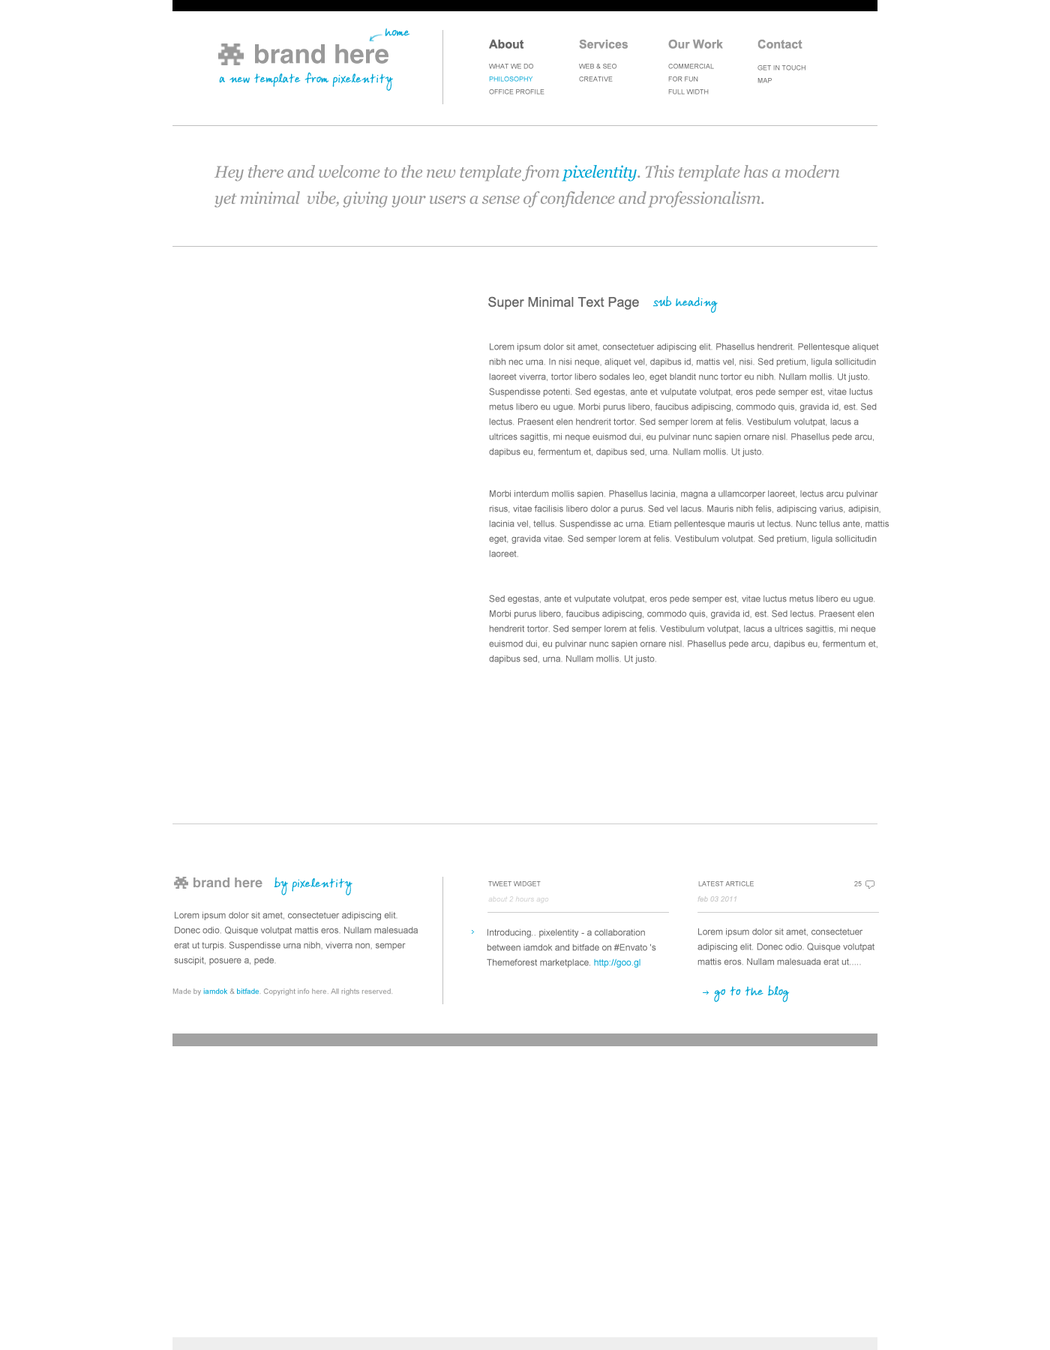
<style>
.page{position:relative;width:1050px;height:1350px;background:#ffffff}
.page>*{position:absolute;margin:0}
.t1{font:12px "ArdleysHand-Plain";color:#00a6d5}
.t2{font:12px "Arial-BoldMT";color:#666666}
.t3{font:12px "Arial-BoldMT";color:#999999}
.t4{font:26.3px "HelveticaLTStd-Bold";color:#999999}
.t5{font:6.8px "ArialMT";color:#666666;text-transform:uppercase}
.t6{font:6.8px "ArialMT";text-transform:uppercase}
.t7{font:16.5px/26.3px "Georgia-Italic";letter-spacing:-0.025em;color:#999999}
.t8{font:16.5px/26.3px "Georgia-Italic";letter-spacing:-0.025em;color:#00a6d5}
.t9{font:13.5px "ArialMT";color:#666666}
.t10{font:9px/15px "ArialMT";color:#666666}
.t11{font:13.5px "HelveticaLTStd-Bold";color:#999999}
.t12{font:7.5px "Arial-ItalicMT";color:#cccccc}
.t13{font:9px/15px "ArialMT";color:#00a6d5}
.t14{font:6px "SempliceRegular";color:#00a6d5}
.t15{font:7.5px "ArialMT";color:#999999}
.t16{font:7.5px "ArialMT";color:#00a6d5}
</style>
<div class="page">
<p class="t1" style="left:385px;top:28px;width:25px;height:9px">home</p>
<p class="t2" style="left:489px;top:39px;width:35px;height:10px">About</p>
<p class="t3" style="left:579px;top:39px;width:50px;height:10px">Services</p>
<p class="t3" style="left:668px;top:39px;width:55px;height:10px">Our Work</p>
<p class="t3" style="left:758px;top:39px;width:45px;height:10px">Contact</p>
<p class="t4" style="left:255px;top:44px;width:134px;height:20px">brand here</p>
<p class="t5" style="left:489px;top:64px;width:44px;height:5px">what we do</p>
<p class="t5" style="left:579px;top:64px;width:38px;height:5px">web &amp; SEO</p>
<p class="t5" style="left:668px;top:64px;width:46px;height:5px">commercial</p>
<p class="t5" style="left:758px;top:65px;width:48px;height:6px">get in touch</p>
<p class="t1" style="left:219px;top:72px;width:174px;height:19px">a new template from pixelentity</p>
<p class="t6" style="left:489px;top:77px;width:44px;height:5px">philosophy</p>
<p class="t5" style="left:579px;top:77px;width:34px;height:5px">creative</p>
<p class="t5" style="left:668px;top:77px;width:30px;height:5px">for fun</p>
<p class="t5" style="left:489px;top:89px;width:56px;height:6px">office profile</p>
<p class="t5" style="left:668px;top:89px;width:41px;height:6px">full width</p>
<p class="t5" style="left:758px;top:78px;width:14px;height:5px">map</p>
<p class="t7" style="left:214px;top:165px;width:626px;height:43px">Hey there and welcome to the new template from <span class="t8">pixelentity</span>. This template has a modern yet minimal  vibe, giving your users a sense of confidence and professionalism.</p>
<p class="t9" style="left:488px;top:296px;width:151px;height:14px">Super Minimal Text Page</p>
<p class="t1" style="left:653px;top:296px;width:65px;height:18px">sub heading</p>
<p class="t10" style="left:489px;top:343px;width:390px;height:114px">Lorem ipsum dolor sit amet, consectetuer adipiscing elit. Phasellus hendrerit. Pellentesque aliquet nibh nec urna. In nisi neque, aliquet vel, dapibus id, mattis vel, nisi. Sed pretium, ligula sollicitudin laoreet viverra, tortor libero sodales leo, eget blandit nunc tortor eu nibh. Nullam mollis. Ut justo. Suspendisse potenti. Sed egestas, ante et vulputate volutpat, eros pede semper est, vitae luctus metus libero eu ugue. Morbi purus libero, faucibus adipiscing, commodo quis, gravida id, est. Sed lectus. Praesent elen hendrerit tortor. Sed semper lorem at felis. Vestibulum volutpat, lacus a ultrices sagittis, mi neque euismod dui, eu pulvinar nunc sapien ornare nisl. Phasellus pede arcu, dapibus eu, fermentum et, dapibus sed, urna. Nullam mollis. Ut justo.</p>
<p class="t10" style="left:489px;top:490px;width:400px;height:174px">Morbi interdum mollis sapien. Phasellus lacinia, magna a ullamcorper laoreet, lectus arcu pulvinar risus, vitae facilisis libero dolor a purus. Sed vel lacus. Mauris nibh felis, adipiscing varius, adipisin, lacinia vel, tellus. Suspendisse ac urna. Etiam pellentesque mauris ut lectus. Nunc tellus ante, mattis eget, gravida vitae. Sed semper lorem at felis. Vestibulum volutpat. Sed pretium, ligula sollicitudin laoreet.<br><br><br>Sed egestas, ante et vulputate volutpat, eros pede semper est, vitae luctus metus libero eu ugue. Morbi purus libero, faucibus adipiscing, commodo quis, gravida id, est. Sed lectus. Praesent elen hendrerit tortor. Sed semper lorem at felis. Vestibulum volutpat, lacus a ultrices sagittis, mi neque euismod dui, eu pulvinar nunc sapien ornare nisl. Phasellus pede arcu, dapibus eu, fermentum et, dapibus sed, urna. Nullam mollis. Ut justo.</p>
<p class="t11" style="left:194px;top:878px;width:69px;height:10px">brand here</p>
<p class="t1" style="left:274px;top:877px;width:79px;height:19px">by pixelentity</p>
<p class="t5" style="left:488px;top:881px;width:53px;height:6px">TWeet widget</p>
<p class="t5" style="left:698px;top:881px;width:56px;height:6px">latest article</p>
<p class="t6" style="left:854px;top:881px;width:8px;height:6px">25</p>
<p class="t12" style="left:488px;top:896px;width:61px;height:8px">about 2 hours ago</p>
<p class="t12" style="left:698px;top:896px;width:39px;height:6px">feb 03 2011</p>
<p class="t10" style="left:174px;top:911px;width:244px;height:54px">Lorem ipsum dolor sit amet, consectetuer adipiscing elit. Donec odio. Quisque volutpat mattis eros. Nullam malesuada erat ut turpis. Suspendisse urna nibh, viverra non, semper suscipit, posuere a, pede.</p>
<p class="t10" style="left:487px;top:929px;width:169px;height:39px">Introducing.. pixelentity - a collaboration between iamdok and bitfade on #Envato 's Themeforest marketplace. <span class="t13">http://goo.gl</span></p>
<p class="t10" style="left:698px;top:928px;width:177px;height:37px">Lorem ipsum dolor sit amet, consectetuer adipiscing elit. Donec odio. Quisque volutpat mattis eros. Nullam malesuada erat ut.....</p>
<p class="t14" style="left:472px;top:930px;width:2px;height:4px">&gt;</p>
<p class="t15" style="left:173px;top:989px;width:220px;height:7px">Made by <span class="t16">iamdok</span> &amp; <span class="t16">bitfade</span>. Copyright info here. All rights reserved.</p>
<p class="t1" style="left:714px;top:986px;width:76px;height:17px">go to the blog</p>
</div>
